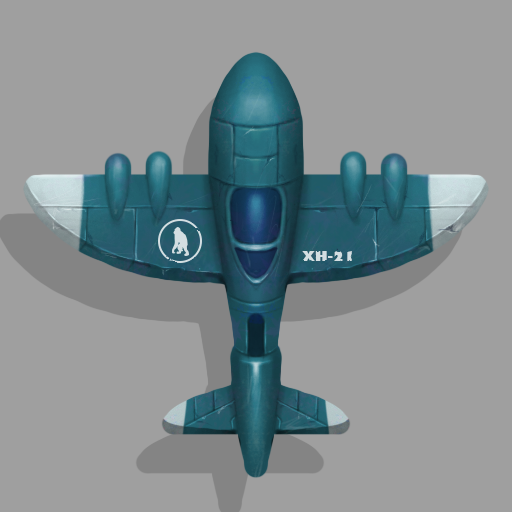
<style>
.page{position:relative;width:512px;height:512px;background:#9f9f9f}
.page>*{position:absolute;margin:0}
.t1{font:13px "GillSans-UltraBold";color:#d3dee1}
</style>
<div class="page">
<p class="t1" style="left:302px;top:251px;width:50px;height:10px">XH-21</p>
</div>
